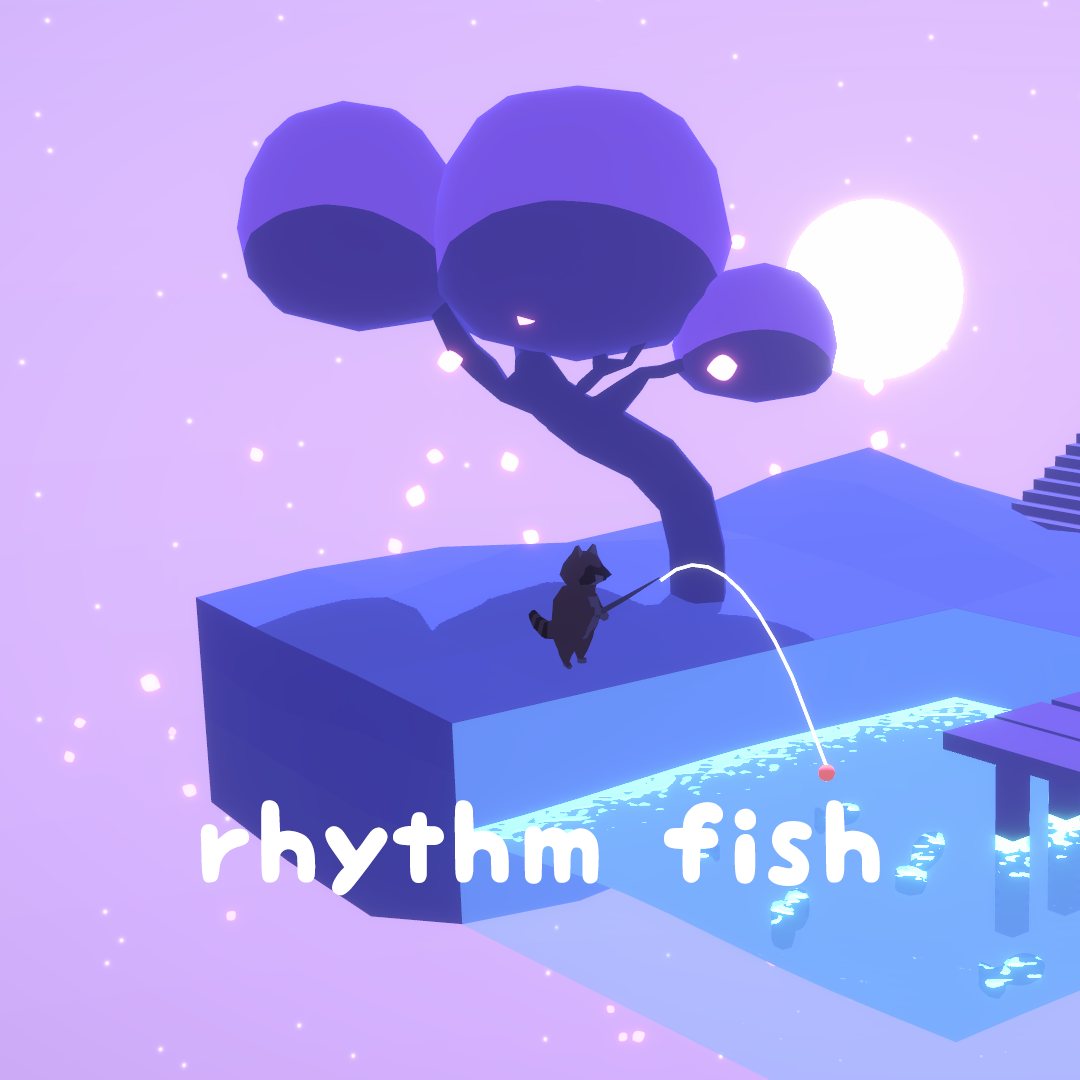
<style>
.page{position:relative;width:1080px;height:1080px}
.page>*{position:absolute;margin:0}
.t1{font:110px "mini-wakuwaku";color:#ffffff}
</style>
<div class="page">
<p class="t1" style="left:200px;top:800px;width:680px;height:96px">rhythm fish</p>
</div>
